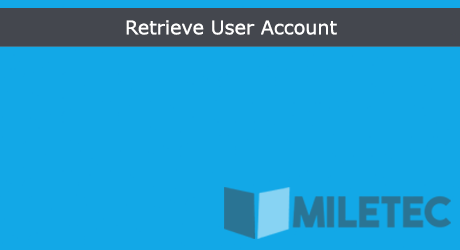
<style>
.page{position:relative;width:460px;height:250px;background:#12a8e7}
.page>*{position:absolute;margin:0}
.t1{font:18.9px "Verdana";color:#ffffff}
</style>
<div class="page">
<p class="t1" style="left:126px;top:20px;width:211px;height:15px">Retrieve User Account</p>
</div>
